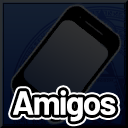
<style>
.page{position:relative;width:128px;height:128px}
.page>*{position:absolute;margin:0}
.t1{font:33.3px "Barlow-Bold";letter-spacing:-0.05em;color:#ffffff}
</style>
<div class="page">
<p class="t1" style="left:13px;top:90px;width:103px;height:32px">Amigos</p>
</div>
